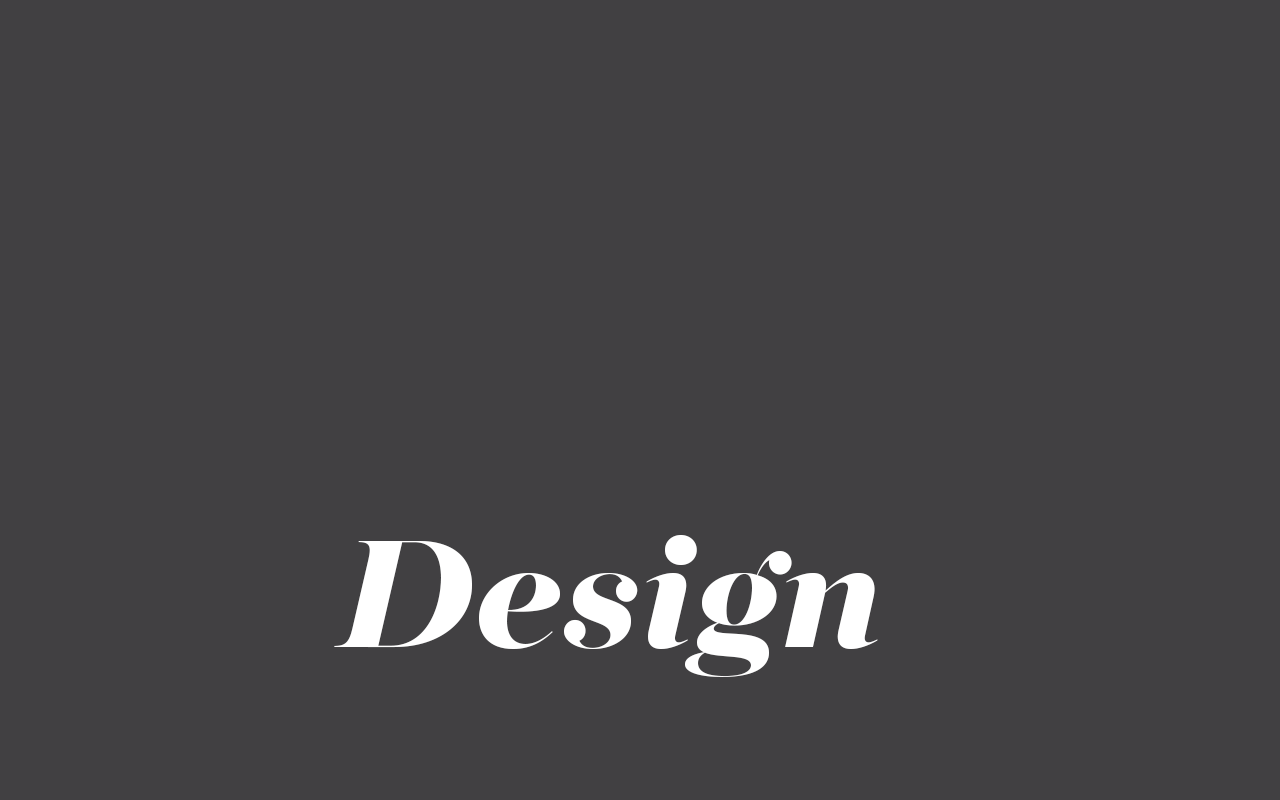
<style>
.page{position:relative;width:1280px;height:800px;background:#414042}
.page>*{position:absolute;margin:0}
.t1{font:172px "MajestiBanner-HeavyItalic";color:#ffffff}
</style>
<div class="page">
<p class="t1" style="left:334px;top:535px;width:544px;height:142px">Design</p>
</div>
